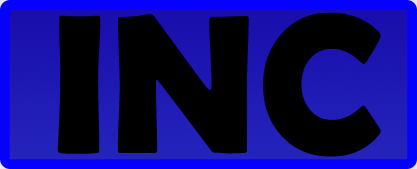
<style>
.page{position:relative;width:417px;height:169px;background:#000000}
.page>*{position:absolute;margin:0}
.t1{font:200px "BerlinSansFBDemi-Bold";color:#000000}
</style>
<div class="page">
<p class="t1" style="left:57px;top:12px;width:324px;height:145px">INC</p>
</div>
